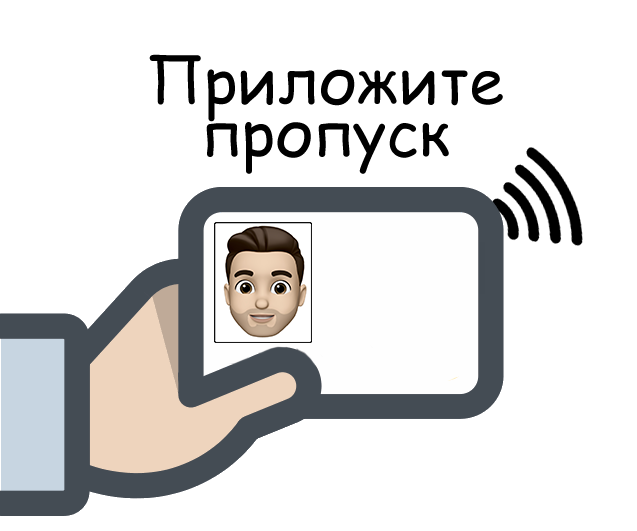
<style>
.page{position:relative;width:637px;height:531px;background:#ffffff}
.page>*{position:absolute;margin:0}
.t1{font:63.2px/52.5px "ComicSansMS";color:#000000}
</style>
<div class="page">
<p class="t1" style="left:149px;top:54px;width:354px;height:120px;text-align:center">Приложите<br>пропуск</p>
</div>
